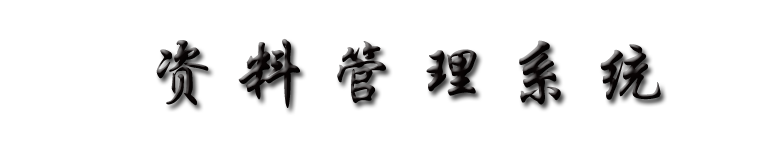
<style>
.page{position:relative;width:778px;height:146px;background:#ffffff}
.page>*{position:absolute;margin:0}
.t1{font:72px "STXingkai";color:#090404}
</style>
<div class="page">
<p class="t1" style="left:156px;top:38px;width:505px;height:70px">资 料 管 理 系 统</p>
</div>
